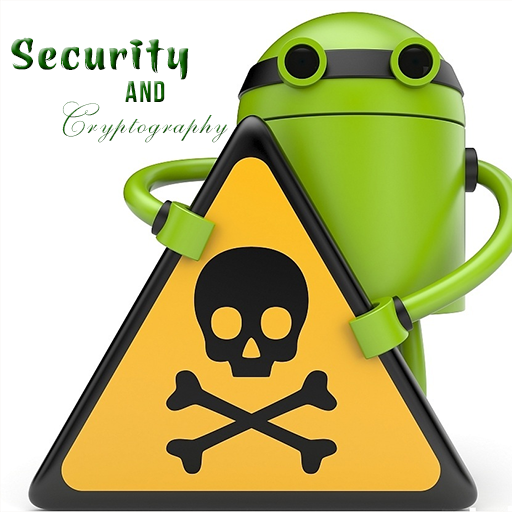
<style>
.page{position:relative;width:512px;height:512px;background:#ffffff}
.page>*{position:absolute;margin:0}
.t1{font:48px "UTM-Azuki";letter-spacing:0.05em}
.t2{font:30px "UTM-Bebas";letter-spacing:0.05em}
.t3{font:30px "UTM-Beautiful-Caps";letter-spacing:0.05em}
</style>
<div class="page">
<p class="t1" style="left:11px;top:37px;width:178px;height:43px">Security</p>
<p class="t2" style="left:125px;top:81px;width:40px;height:21px">And</p>
<p class="t3" style="left:62px;top:101px;width:166px;height:42px">Cryptography</p>
</div>
